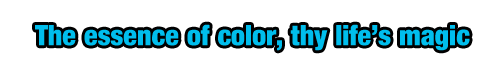
<style>
.page{position:relative;width:500px;height:70px;background:#ffffff}
.page>*{position:absolute;margin:0}
.t1{font:28px "Harvest";color:#00beed}
</style>
<div class="page">
<p class="t1" style="left:35px;top:24px;width:435px;height:27px">The essence of color, thy life’s magic</p>
</div>
